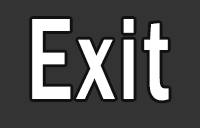
<style>
.page{position:relative;width:200px;height:128px;background:#333333}
.page>*{position:absolute;margin:0}
.t1{font:120px "FranklinGothic-Medium";letter-spacing:0.04em;color:#ffffff;scale:0.72 1}
</style>
<div class="page">
<p class="t1" style="left:32px;top:19px;width:137px;height:82px">Exit</p>
</div>
